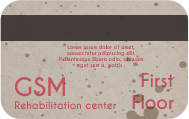
<style>
.page{position:relative;width:189px;height:119px}
.page>*{position:absolute;margin:0}
.t1{font:5px "CaviarDreams-Bold"}
.t2{font:24px "CaviarDreams-Bold";color:#c55159}
.t3{font:18px "CaviarDreams-Bold";color:#c55059}
.t4{font:10px "CaviarDreams-Bold";color:#c55059}
</style>
<div class="page">
<p class="t1" style="left:59px;top:45px;width:84px;height:23px;text-align:center">Lorem ipsum dolor sit amet, consectetur adipiscing elit. Pellentesque libero odio, aliquam eget sem a, mattis .</p>
<p class="t2" style="left:15px;top:77px;width:50px;height:20px">GSM</p>
<p class="t3" style="left:132px;top:73px;width:42px;height:37px;text-align:right">First Floor</p>
<p class="t4" style="left:15px;top:101px;width:101px;height:9px">Rehabilitation center</p>
</div>
